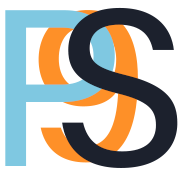
<style>
.page{position:relative;width:180px;height:180px;background:#ffffff}
.page>*{position:absolute;margin:0}
.t1{font:223.9px "AcuminConcept-Regular";letter-spacing:0.3em;color:#7fc8e1}
.t2{font:223.9px "AcuminConcept-Regular";letter-spacing:0.3em;color:#fe9028}
.t3{font:223.9px "AcuminConcept-Regular";letter-spacing:0.3em;color:#1c212d}
</style>
<div class="page">
<p class="t1" style="left:5px;top:10px;width:110px;height:156px">P</p>
<p class="t2" style="left:38px;top:10px;width:100px;height:153px">9</p>
<p class="t3" style="left:62px;top:7px;width:116px;height:161px">S<br><br><br><br><br><br>S</p>
</div>
